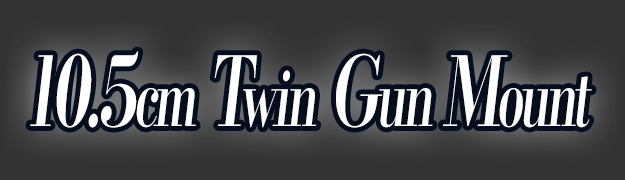
<style>
.page{position:relative;width:625px;height:180px;background:#333333}
.page>*{position:absolute;margin:0}
.t1{font:96px "KochoStd-Heavy";letter-spacing:-0.08em;color:#ffffff;font-style:italic;scale:0.65 1}
.t2{font:76.8px "KochoStd-Heavy";letter-spacing:-0.08em;color:#ffffff;font-style:italic;scale:0.65 1}
</style>
<div class="page">
<p class="t1" style="left:30px;top:51px;width:562px;height:77px">10.5<span class="t2">cm</span> T<span class="t2">win</span> G<span class="t2">un </span>M<span class="t2">ount</span></p>
</div>
